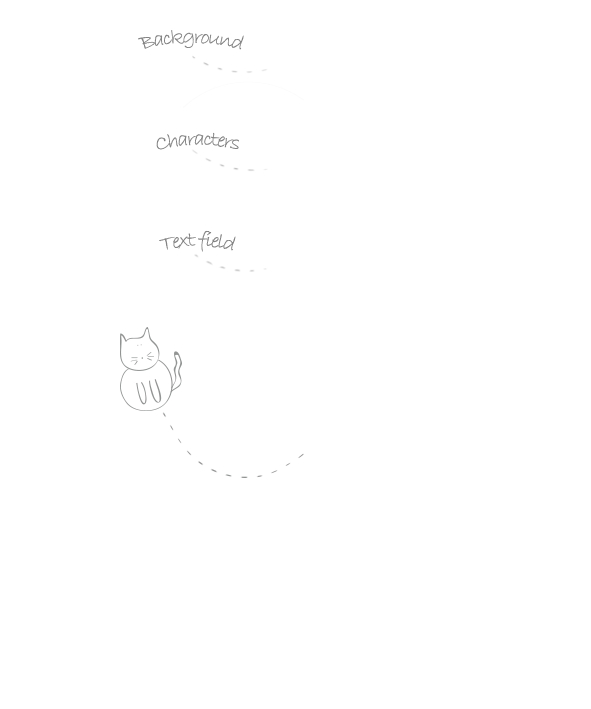
<style>
.page{position:relative;width:591px;height:709px;background:#ffffff}
.page>*{position:absolute;margin:0}
.t1{font:20.8px "BradleyHandITC";letter-spacing:-0.075em;color:#838383}
</style>
<div class="page">
<p class="t1" style="left:138px;top:30px;width:106px;height:20px">Background</p>
<p class="t1" style="left:156px;top:132px;width:83px;height:18px">Characters</p>
<p class="t1" style="left:159px;top:230px;width:77px;height:22px">Text field</p>
</div>
